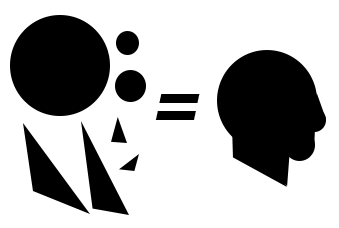
<style>
.page{position:relative;width:339px;height:228px;background:#ffffff}
.page>*{position:absolute;margin:0}
.t1{font:72px "Helvetica-BoldOblique";color:#000000}
</style>
<div class="page">
<p class="t1" style="left:155px;top:94px;width:45px;height:26px">=</p>
</div>
